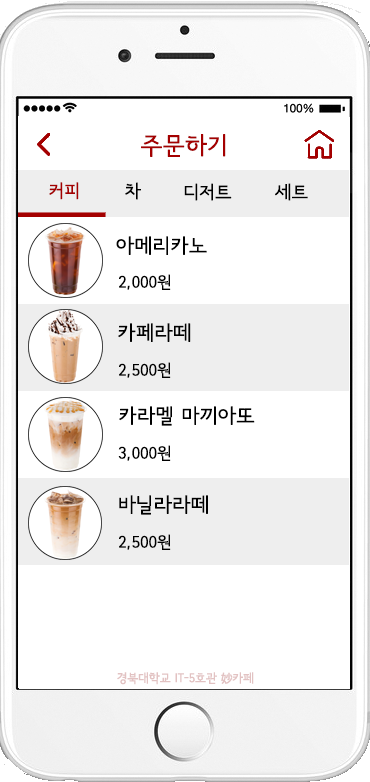
<style>
.page{position:relative;width:370px;height:782px;background:#ffffff}
.page>*{position:absolute;margin:0}
.t1{font:24px "SeoulNamsanL";color:#a40000;font-weight:bold}
.t2{font:18px "SeoulNamsanL";color:#a40000;font-weight:bold}
.t3{font:18px "SeoulNamsanL";color:#000000;font-weight:bold}
.t4{font:20px "SeoulNamsanL";color:#000000;font-weight:bold}
.t5{font:16px "SeoulNamsanL";color:#000000;font-weight:bold}
.t6{font:12.4px "SeoulNamsanB";color:#e2c2c2}
</style>
<div class="page">
<p class="t1" style="left:141px;top:134px;width:85px;height:23px">주문하기</p>
<p class="t2" style="left:49px;top:182px;width:30px;height:18px">커피</p>
<p class="t3" style="left:125px;top:182px;width:16px;height:18px">차</p>
<p class="t3" style="left:184px;top:183px;width:48px;height:18px">디저트</p>
<p class="t3" style="left:275px;top:183px;width:33px;height:18px">세트</p>
<p class="t4" style="left:116px;top:236px;width:91px;height:19px">아메리카노</p>
<p class="t5" style="left:119px;top:274px;width:52px;height:16px">2,000원</p>
<p class="t4" style="left:118px;top:323px;width:73px;height:19px">카페라떼</p>
<p class="t5" style="left:119px;top:362px;width:52px;height:16px">2,500원</p>
<p class="t4" style="left:119px;top:406px;width:136px;height:20px">카라멜 마끼아또</p>
<p class="t5" style="left:118px;top:445px;width:53px;height:16px">3,000원</p>
<p class="t4" style="left:119px;top:495px;width:89px;height:20px">바닐라라떼</p>
<p class="t5" style="left:119px;top:534px;width:52px;height:16px">2,500원</p>
<p class="t6" style="left:117px;top:672px;width:137px;height:13px">경북대학교 IT-5호관 妙카페</p>
</div>
